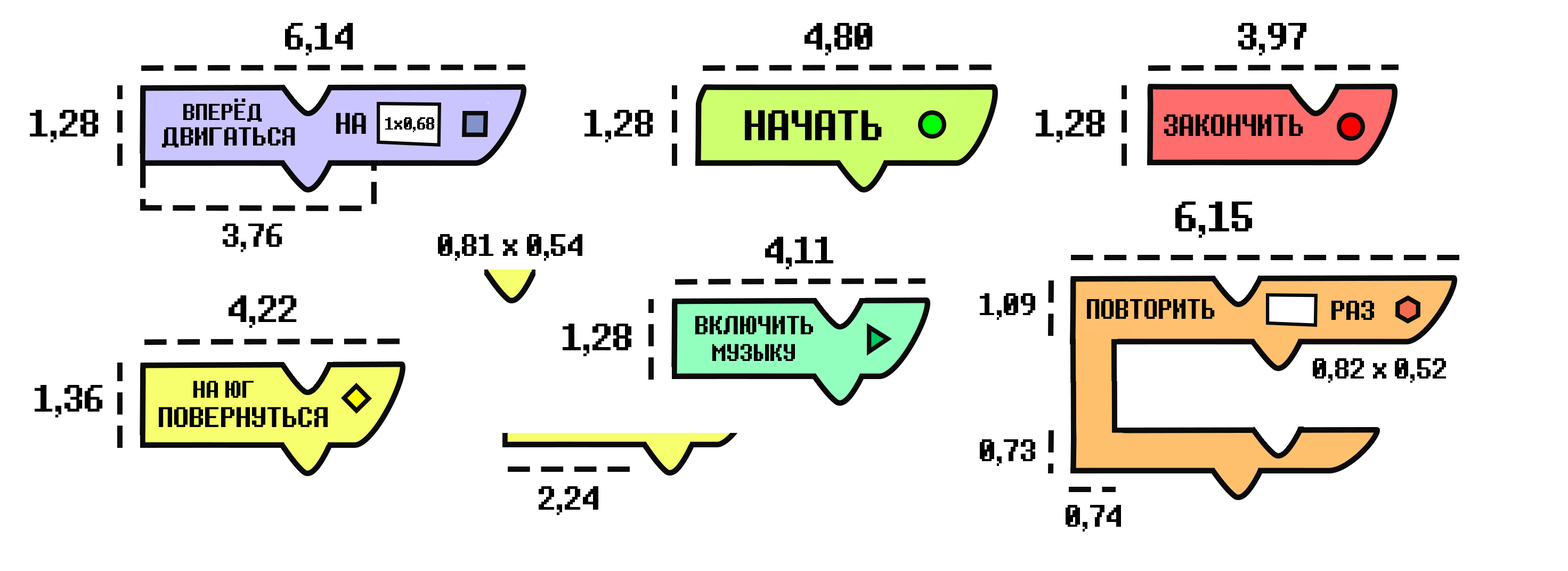
<style>
.page{position:relative;width:1568px;height:571px;background:#ffffff}
.page>*{position:absolute;margin:0}
.t1{font:35.5px "Determination";color:#000000}
.t2{font:16px "Determination";color:#000000}
.t3{font:40px "Determination";color:#000000}
.t4{font:31.1px "Determination";color:#000000}
.t5{font:28.9px "Determination";color:#000000}
.t6{font:26.6px "Determination";color:#000000}
</style>
<div class="page">
<p class="t1" style="left:285px;top:23px;width:68px;height:32px">6,14</p>
<p class="t1" style="left:805px;top:23px;width:68px;height:32px">4,80</p>
<p class="t1" style="left:1238px;top:23px;width:68px;height:32px">3,97</p>
<p class="t1" style="left:30px;top:110px;width:69px;height:32px">1,28</p>
<p class="t1" style="left:584px;top:110px;width:69px;height:32px">1,28</p>
<p class="t1" style="left:1036px;top:110px;width:68px;height:32px">1,28</p>
<p class="t2" style="left:385px;top:117px;width:49px;height:15px">1x0,68</p>
<p class="t3" style="left:1175px;top:201px;width:77px;height:37px">6,15</p>
<p class="t4" style="left:223px;top:223px;width:59px;height:29px">3,76</p>
<p class="t5" style="left:438px;top:234px;width:144px;height:27px">0,81 x 0,54</p>
<p class="t1" style="left:765px;top:237px;width:68px;height:32px">4,11</p>
<p class="t5" style="left:980px;top:293px;width:55px;height:27px">1,09</p>
<p class="t1" style="left:229px;top:295px;width:68px;height:33px">4,22</p>
<p class="t1" style="left:563px;top:323px;width:68px;height:33px">1,28</p>
<p class="t6" style="left:1313px;top:358px;width:133px;height:25px">0,82 x 0,52</p>
<p class="t1" style="left:35px;top:385px;width:68px;height:32px">1,36</p>
<p class="t5" style="left:980px;top:439px;width:55px;height:27px">0,73</p>
<p class="t4" style="left:539px;top:486px;width:59px;height:29px">2,24</p>
<p class="t5" style="left:1066px;top:505px;width:55px;height:26px">0,74</p>
</div>
